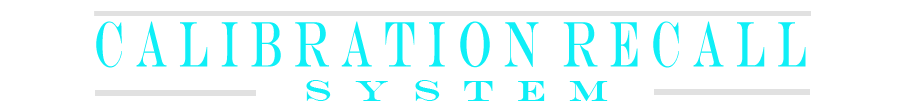
<style>
.page{position:relative;width:904px;height:104px;background:#ffffff}
.page>*{position:absolute;margin:0}
.t1{font:64.9px "EngraversMT";color:#0feff7;scale:0.55 1}
.t2{font:38.8px "EngraversMT";color:#22c022;scale:0.55 1}
.t3{font:30.1px "EngraversMT";color:#0feff7;scale:1.18 1}
</style>
<div class="page">
<p class="t1" style="left:96px;top:21px;width:710px;height:47px"><span class="t2"><br></span>C a l i b r a t i o n  r e c a l l</p>
<p class="t3" style="left:306px;top:80px;width:302px;height:21px">s  y  s  t  e  m</p>
</div>
